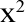
<style>
.page{position:relative;width:25px;height:22px;background:#ffffff}
.page>*{position:absolute;margin:0}
.t1{font:30px "TimesNewRomanPSMT";color:#000000;scale:1.05 1}
</style>
<div class="page">
<p class="t1" style="left:0px;top:0px;width:25px;height:22px">x2</p>
</div>
